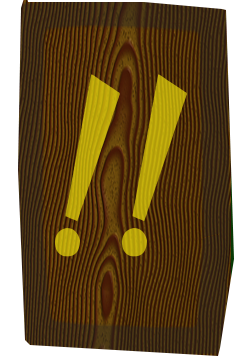
<style>
.page{position:relative;width:234px;height:358px}
.page>*{position:absolute;margin:0}
.t1{font:187.6px "Grinched";letter-spacing:0.1em;color:#bba50a;scale:0.83 1}
</style>
<div class="page">
<p class="t1" style="left:54px;top:74px;width:133px;height:183px">!!</p>
</div>
